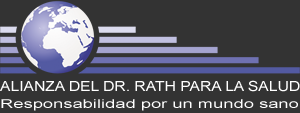
<style>
.page{position:relative;width:300px;height:113px;background:#333333}
.page>*{position:absolute;margin:0}
.t1{font:14px "ArialMT";color:#ffffff;scale:1.12 1}
.t2{font:12px "ArialMT";color:#ffffff;scale:1.53 1}
</style>
<div class="page">
<p class="t1" style="left:0px;top:80px;width:300px;height:12px">ALIANZA DEL DR. RATH PARA LA SALUD</p>
<p class="t2" style="left:1px;top:99px;width:297px;height:12px">Responsabilidad por un mundo sano</p>
</div>
